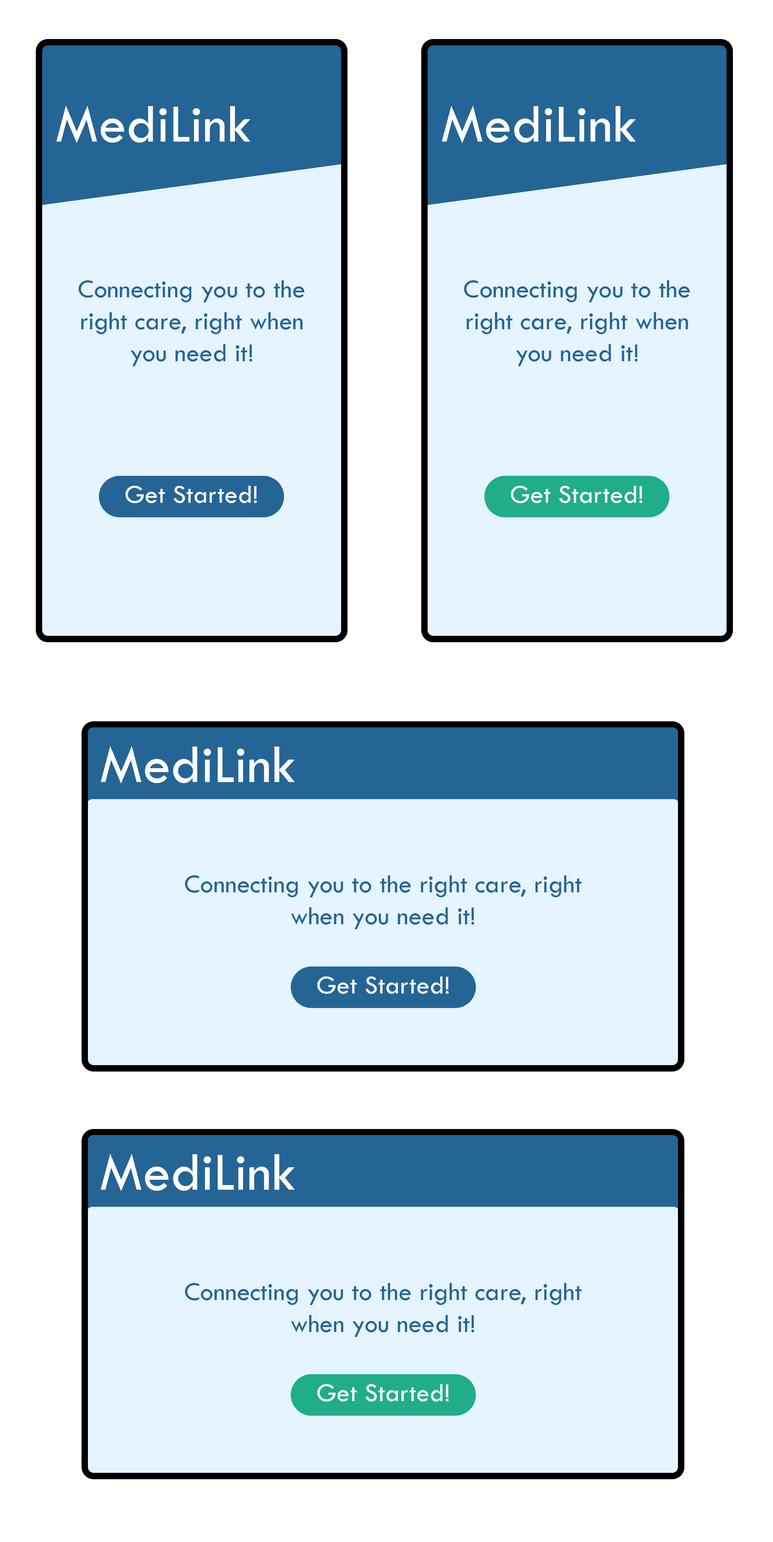
<style>
.page{position:relative;width:773px;height:1542px;background:#e5f4ff}
.page>*{position:absolute;margin:0}
.t1{font:55.7px "TwCenMT-Regular";color:#ffffff}
.t2{font:26.6px "TwCenMT-Regular";color:#246596}
.t3{font:26.6px "TwCenMT-Regular";color:#ffffff}
</style>
<div class="page">
<p class="t1" style="left:56px;top:106px;width:195px;height:37px">MediLink</p>
<p class="t1" style="left:442px;top:106px;width:194px;height:37px">MediLink</p>
<p class="t2" style="left:78px;top:280px;width:227px;height:86px;text-align:center">Connecting you to the right care, right when you need it!</p>
<p class="t2" style="left:464px;top:280px;width:226px;height:86px;text-align:center">Connecting you to the right care, right when you need it!</p>
<p class="t3" style="left:125px;top:486px;width:132px;height:17px">Get Started!</p>
<p class="t3" style="left:511px;top:486px;width:132px;height:17px">Get Started!</p>
<p class="t1" style="left:101px;top:746px;width:194px;height:37px">MediLink</p>
<p class="t2" style="left:185px;top:875px;width:397px;height:54px;text-align:center">Connecting you to the right care, right when you need it!</p>
<p class="t3" style="left:317px;top:976px;width:132px;height:18px">Get Started!</p>
<p class="t1" style="left:101px;top:1154px;width:194px;height:37px">MediLink</p>
<p class="t2" style="left:185px;top:1283px;width:397px;height:54px;text-align:center">Connecting you to the right care, right when you need it!</p>
<p class="t3" style="left:317px;top:1384px;width:132px;height:17px">Get Started!</p>
</div>
